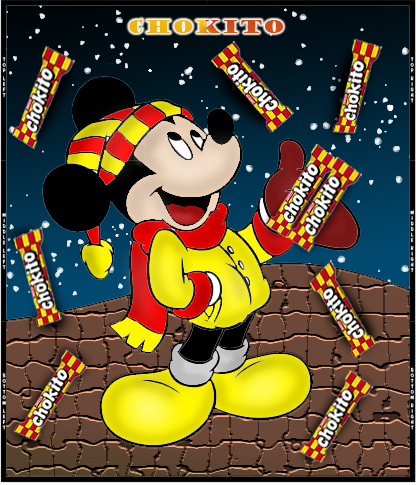
<style>
.page{position:relative;width:419px;height:485px}
.page>*{position:absolute;margin:0}
.t1{font:18px "GoudyStout"}
</style>
<div class="page">
<p class="t1" style="left:129px;top:19px;width:154px;height:14px">CHOKITO</p>
</div>
